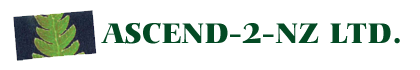
<style>
.page{position:relative;width:420px;height:70px;background:#ffffff}
.page>*{position:absolute;margin:0}
.t1{font:30px "CarminaBT-Black";color:#034a24}
</style>
<div class="page">
<p class="t1" style="left:101px;top:22px;width:299px;height:22px">ASCEND-2-NZ LTD.</p>
</div>
